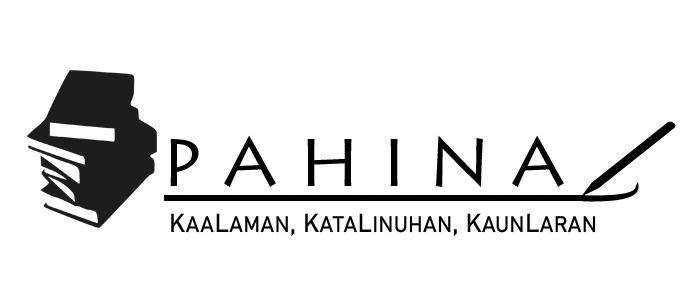
<style>
.page{position:relative;width:700px;height:304px;background:#ffffff}
.page>*{position:absolute;margin:0}
.t1{font:22.2px "Bahnschrift";letter-spacing:0.01em;color:#000000}
.t2{font:25.8px "Bahnschrift";letter-spacing:0.01em;color:#000000}
</style>
<div class="page">
<p class="t1" style="left:171px;top:213px;width:425px;height:23px"><span class="t2">K</span>AA<span class="t2">L</span>AMAN<span class="t2">, K</span>ATA<span class="t2">L</span>INUHAN<span class="t2">, K</span>AUN<span class="t2">L</span>ARAN</p>
</div>
